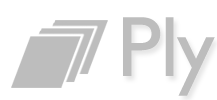
<style>
.page{position:relative;width:217px;height:100px;background:#ffffff}
.page>*{position:absolute;margin:0}
.t1{font:86px "GillSans";letter-spacing:-0.015em;color:#bdbdbd}
</style>
<div class="page">
<p class="t1" style="left:123px;top:17px;width:92px;height:79px">Ply</p>
</div>
